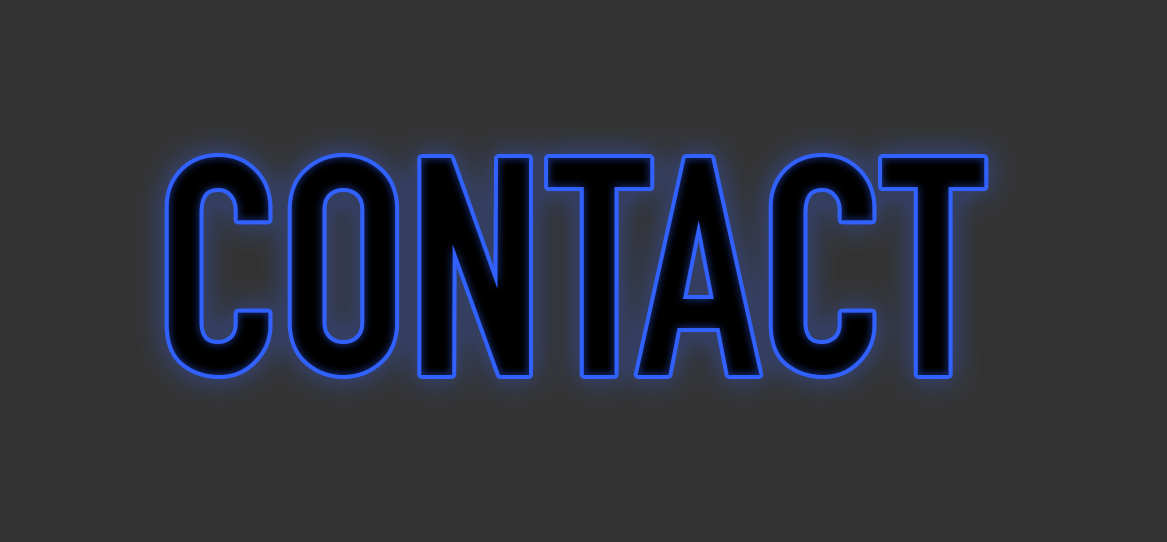
<style>
.page{position:relative;width:1167px;height:542px;background:#333333}
.page>*{position:absolute;margin:0}
.t1{font:302.5px "DINEngschrift";color:#010204}
</style>
<div class="page">
<p class="t1" style="left:168px;top:157px;width:817px;height:218px">CONTACT</p>
</div>
